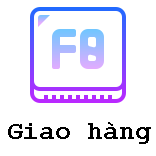
<style>
.page{position:relative;width:156px;height:156px;background:#ffffff}
.page>*{position:absolute;margin:0}
.t1{font:26px "CourierNewPS-BoldMT";color:#000000}
</style>
<div class="page">
<p class="t1" style="left:8px;top:122px;width:143px;height:22px">Giao hàng</p>
</div>
